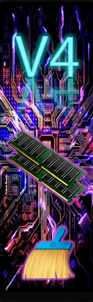
<style>
.page{position:relative;width:93px;height:302px}
.page>*{position:absolute;margin:0}
.t1{font:60px "MyriadPro-Regular"}
</style>
<div class="page">
<p class="t1" style="left:15px;top:36px;width:64px;height:41px">V4</p>
<p class="t1" style="left:15px;top:79px;width:64px;height:41px">V4</p>
</div>
